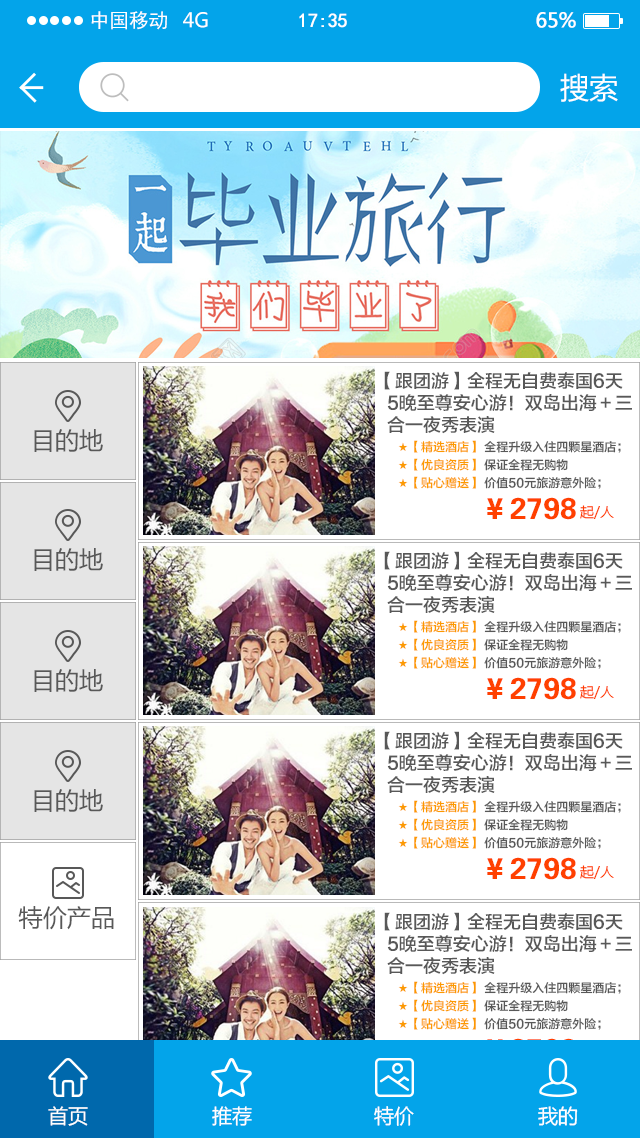
<style>
.page{position:relative;width:640px;height:1138px;background:#ffffff}
.page>*{position:absolute;margin:0}
.t1{font:19.7px "SimHei";color:#ffffff}
.t2{font:19.7px "MicrosoftYaHei";color:#ffffff}
.t3{font:19.7px "SimHei";letter-spacing:-0.022em;color:#ffffff;font-weight:bold}
.t4{font:19.7px "MicrosoftYaHei";letter-spacing:-0.022em;color:#ffffff;font-weight:bold}
.t5{font:29.1px "MicrosoftYaHei";color:#ffffff}
.t6{font:18px/22px "FZLTZHK--GBK1-0";color:#585858}
.t7{font:24px "MicrosoftYaHei";color:#585858}
.t8{font:12px/18px "FZLTZHK--GBK1-0";color:#585858}
.t9{font:12px/18px "FZLTZHK--GBK1-0";color:#fc9a00}
.t10{font:30px "FZDHTK--GBK1-0";color:#ff4000}
.t11{font:14px "MicrosoftYaHei";color:#ff4000}
.t12{font:20px "MicrosoftYaHei";color:#ffffff}
</style>
<div class="page">
<p class="t1" style="left:91px;top:11px;width:76px;height:19px">中国移动</p>
<p class="t2" style="left:183px;top:12px;width:25px;height:16px">4G</p>
<p class="t3" style="left:299px;top:13px;width:48px;height:15px">17:35</p>
<p class="t4" style="left:536px;top:12px;width:40px;height:16px">65%</p>
<p class="t5" style="left:560px;top:73px;width:58px;height:29px">搜索</p>
<p class="t6" style="left:384px;top:371px;width:248px;height:63px">【跟团游】全程无自费泰国6天<br>  5晚至尊安心游！双岛出海＋三<br>  合一夜秀表演</p>
<p class="t7" style="left:34px;top:429px;width:69px;height:23px">目的地</p>
<p class="t8" style="left:398px;top:440px;width:223px;height:49px"><span class="t9">★【精选酒店】</span> 全程升级入住四颗星酒店；<br><span class="t9">★【优良资质】</span> 保证全程无购物<br><span class="t9">★【贴心赠送】</span> 价值50元旅游意外险；</p>
<p class="t10" style="left:487px;top:497px;width:89px;height:23px">￥2798</p>
<p class="t11" style="left:580px;top:505px;width:34px;height:14px">起/人</p>
<p class="t7" style="left:34px;top:548px;width:69px;height:23px">目的地</p>
<p class="t6" style="left:384px;top:551px;width:248px;height:63px">【跟团游】全程无自费泰国6天<br>  5晚至尊安心游！双岛出海＋三<br>  合一夜秀表演</p>
<p class="t8" style="left:398px;top:620px;width:223px;height:49px"><span class="t9">★【精选酒店】</span> 全程升级入住四颗星酒店；<br><span class="t9">★【优良资质】</span> 保证全程无购物<br><span class="t9">★【贴心赠送】</span> 价值50元旅游意外险；</p>
<p class="t7" style="left:34px;top:669px;width:69px;height:23px">目的地</p>
<p class="t10" style="left:487px;top:677px;width:89px;height:23px">￥2798</p>
<p class="t11" style="left:580px;top:685px;width:34px;height:14px">起/人</p>
<p class="t6" style="left:384px;top:731px;width:248px;height:63px">【跟团游】全程无自费泰国6天<br>  5晚至尊安心游！双岛出海＋三<br>  合一夜秀表演</p>
<p class="t7" style="left:34px;top:789px;width:69px;height:23px">目的地</p>
<p class="t8" style="left:398px;top:800px;width:223px;height:49px"><span class="t9">★【精选酒店】</span> 全程升级入住四颗星酒店；<br><span class="t9">★【优良资质】</span> 保证全程无购物<br><span class="t9">★【贴心赠送】</span> 价值50元旅游意外险；</p>
<p class="t10" style="left:487px;top:857px;width:89px;height:23px">￥2798</p>
<p class="t11" style="left:580px;top:865px;width:34px;height:14px">起/人</p>
<p class="t7" style="left:18px;top:906px;width:96px;height:24px">特价产品</p>
<p class="t6" style="left:384px;top:912px;width:248px;height:63px">【跟团游】全程无自费泰国6天<br>  5晚至尊安心游！双岛出海＋三<br>  合一夜秀表演</p>
<p class="t8" style="left:398px;top:981px;width:223px;height:49px"><span class="t9">★【精选酒店】</span> 全程升级入住四颗星酒店；<br><span class="t9">★【优良资质】</span> 保证全程无购物<br><span class="t9">★【贴心赠送】</span> 价值50元旅游意外险；</p>
<p class="t12" style="left:48px;top:1106px;width:40px;height:20px">首页</p>
<p class="t12" style="left:212px;top:1106px;width:40px;height:20px">推荐</p>
<p class="t12" style="left:374px;top:1106px;width:40px;height:20px">特价</p>
<p class="t12" style="left:538px;top:1106px;width:40px;height:20px">我的</p>
</div>
